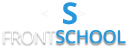
<style>
.page{position:relative;width:132px;height:49px;background:#ffffff}
.page>*{position:absolute;margin:0}
.t1{font:30px "OpenSans-Bold";letter-spacing:-0.1em;color:#ffffff}
.t2{font:30px "OpenSans-Bold";letter-spacing:-0.1em;color:#2697dd}
.t3{font:15px "OpenSans-Bold";letter-spacing:-0.1em;color:#f6f6f6}
.t4{font:18px "OpenSans-Semibold";letter-spacing:-0.025em;color:#2697dd;text-transform:uppercase}
.t5{font:18px "OpenSans-Light";letter-spacing:-0.025em;color:#ffffff;text-transform:uppercase}
</style>
<div class="page">
<p class="t1" style="left:50px;top:2px;width:27px;height:23px">F<span class="t2">S</span></p>
<p class="t3" style="left:41px;top:9px;width:8px;height:9px">&lt;</p>
<p class="t3" style="left:78px;top:9px;width:7px;height:9px;rotate:180deg">&lt;</p>
<p class="t4" style="left:3px;top:30px;width:123px;height:14px"><span class="t5">Front</span>School</p>
</div>
